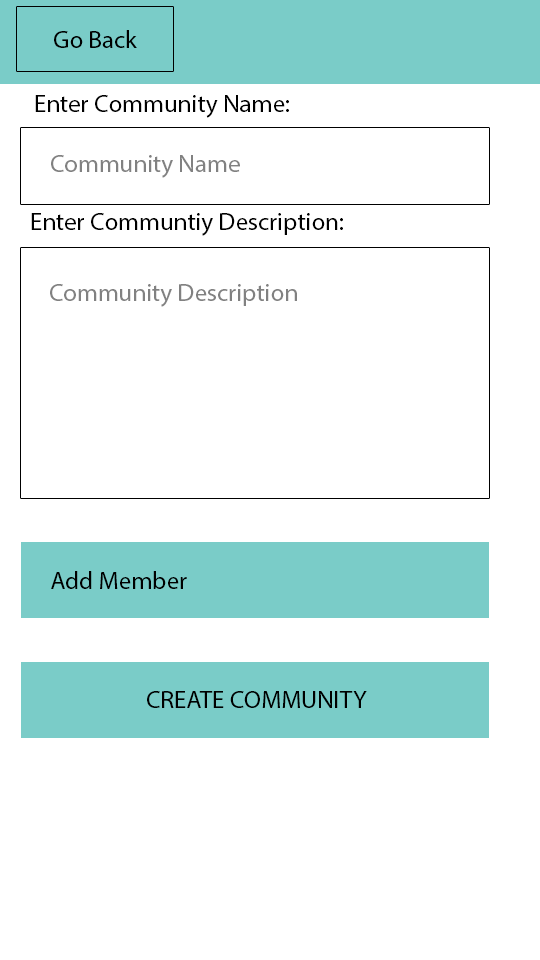
<style>
.page{position:relative;width:540px;height:960px;background:#ffffff}
.page>*{position:absolute;margin:0}
.t1{font:25px "MyriadPro-Regular";color:#000000}
.t2{font:25px "MyriadPro-Regular";color:#818181}
</style>
<div class="page">
<p class="t1" style="left:54px;top:30px;width:83px;height:18px">Go Back</p>
<p class="t1" style="left:35px;top:95px;width:254px;height:23px">Enter Community Name:</p>
<p class="t2" style="left:51px;top:155px;width:189px;height:23px">Community Name</p>
<p class="t1" style="left:31px;top:213px;width:312px;height:23px">Enter Communtiy Description:</p>
<p class="t2" style="left:50px;top:284px;width:247px;height:23px">Community Description</p>
<p class="t1" style="left:51px;top:571px;width:136px;height:18px">Add Member</p>
<p class="t1" style="left:147px;top:691px;width:220px;height:17px">CREATE COMMUNITY</p>
</div>
